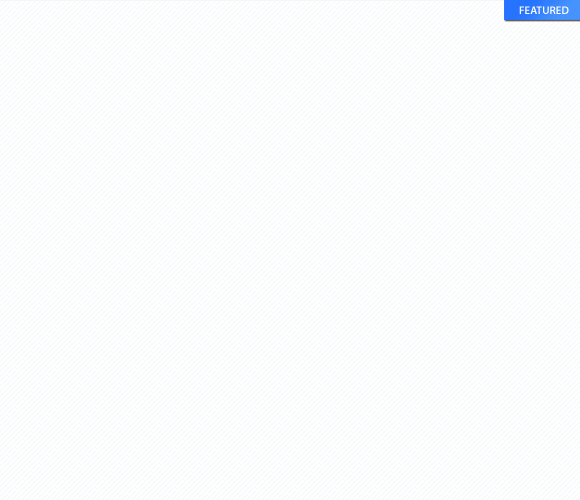
<style>
.page{position:relative;width:580px;height:500px;background:#ffffff}
.page>*{position:absolute;margin:0}
.t1{font:11px "MyriadPro-Semibold";color:#ffffff}
</style>
<div class="page">
<p class="t1" style="left:519px;top:6px;width:50px;height:8px">FEATURED</p>
</div>
